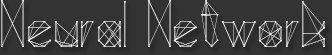
<style>
.page{position:relative;width:332px;height:55px;background:#333333}
.page>*{position:absolute;margin:0}
.t1{font:60px "ScienceNoire";color:#ffffff}
</style>
<div class="page">
<p class="t1" style="left:0px;top:0px;width:325px;height:47px">Neural Network</p>
</div>
